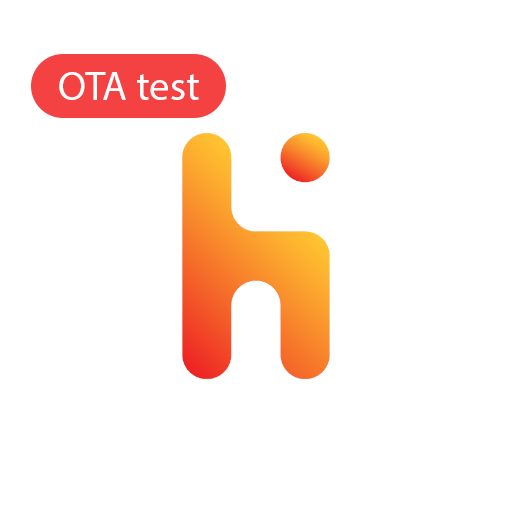
<style>
.page{position:relative;width:512px;height:512px;background:#ffffff}
.page>*{position:absolute;margin:0}
.t1{font:41px "MyriadPro-Regular";color:#ffffff}
</style>
<div class="page">
<p class="t1" style="left:59px;top:72px;width:140px;height:28px">OTA test</p>
</div>
